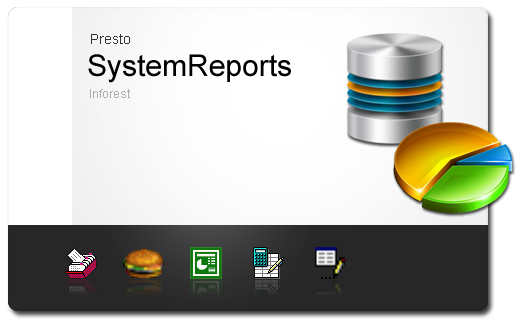
<style>
.page{position:relative;width:522px;height:332px;background:#ffffff}
.page>*{position:absolute;margin:0}
.t1{font:14px "ArialMT";color:#323232}
.t2{font:30px "ArialMT";color:#000000}
.t3{font:12px "ArialMT";color:#adadad}
</style>
<div class="page">
<p class="t1" style="left:91px;top:34px;width:39px;height:10px">Presto</p>
<p class="t2" style="left:88px;top:54px;width:203px;height:29px">SystemReports</p>
<p class="t3" style="left:90px;top:89px;width:40px;height:9px">Inforest</p>
</div>
